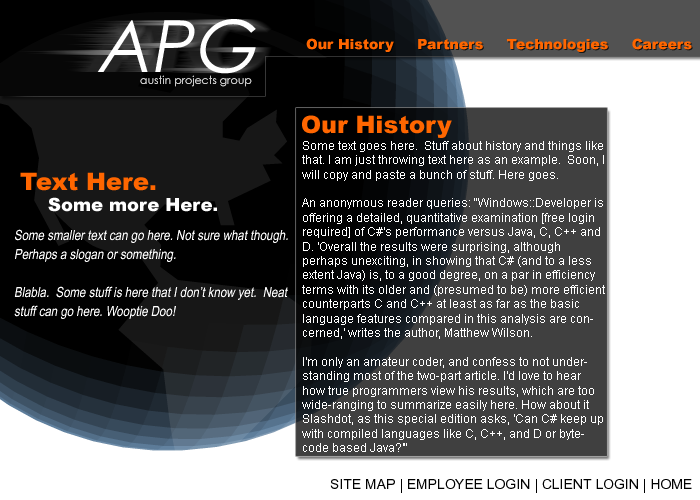
<style>
.page{position:relative;width:700px;height:500px;background:#ffffff}
.page>*{position:absolute;margin:0}
.t1{font:72px "CenturyGothic";color:#ffffff;font-style:italic}
.t2{font:14px "Arial-Black";color:#ff6600}
.t3{font:11px "CenturyGothic";color:#cacaca}
.t4{font:24px "Arial-Black";color:#ff6600}
.t5{font:12px "ArialMT";color:#ffffff}
.t6{font:18px "Arial-Black";color:#ffffff}
.t7{font:14px/19px "ArialNarrow";color:#ffffff;font-style:italic}
.t8{font:14px "ArialMT";color:#000000}
</style>
<div class="page">
<p class="t1" style="left:97px;top:19px;width:159px;height:55px">APG</p>
<p class="t2" style="left:306px;top:38px;width:386px;height:14px">Our History     Partners     Technologies     Careers</p>
<p class="t3" style="left:140px;top:75px;width:112px;height:12px">austin projects group</p>
<p class="t4" style="left:302px;top:115px;width:150px;height:23px">Our History</p>
<p class="t5" style="left:302px;top:141px;width:303px;height:311px">Some text goes here.  Stuff about history and things like that. I am just throwing text here as an example.  Soon, I will copy and paste a bunch of stuff. Here goes.<br><br>An anonymous reader queries: "Windows::Developer is offering a detailed, quantitative examination [free login required] of C#'s performance versus Java, C, C++ and D. 'Overall the results were surprising, although perhaps unexciting, in showing that C# (and to a less extent Java) is, to a good degree, on a par in efficiency terms with its older and (presumed to be) more efficient counterparts C and C++ at least as far as the basic language features compared in this analysis are concerned,' writes the author, Matthew Wilson. <br><br>I'm only an amateur coder, and confess to not understanding most of the two-part article. I'd love to hear how true programmers view his results, which are too wide-ranging to summarize easily here. How about it Slashdot, as this special edition asks, 'Can C# keep up with compiled languages like C, C++, and D or byte-code based Java?'"</p>
<p class="t4" style="left:20px;top:172px;width:136px;height:19px">Text Here.</p>
<p class="t6" style="left:48px;top:197px;width:169px;height:15px">Some more Here.</p>
<p class="t7" style="left:14px;top:229px;width:274px;height:90px">Some smaller text can go here. Not sure what though.<br>Perhaps a slogan or something.<br><br>Blabla.  Some stuff is here that I don’t know yet.  Neat <br>stuff can go here. Wooptie Doo!</p>
<p class="t8" style="left:330px;top:479px;width:362px;height:14px">SITE MAP | EMPLOYEE LOGIN | CLIENT LOGIN | HOME</p>
</div>
